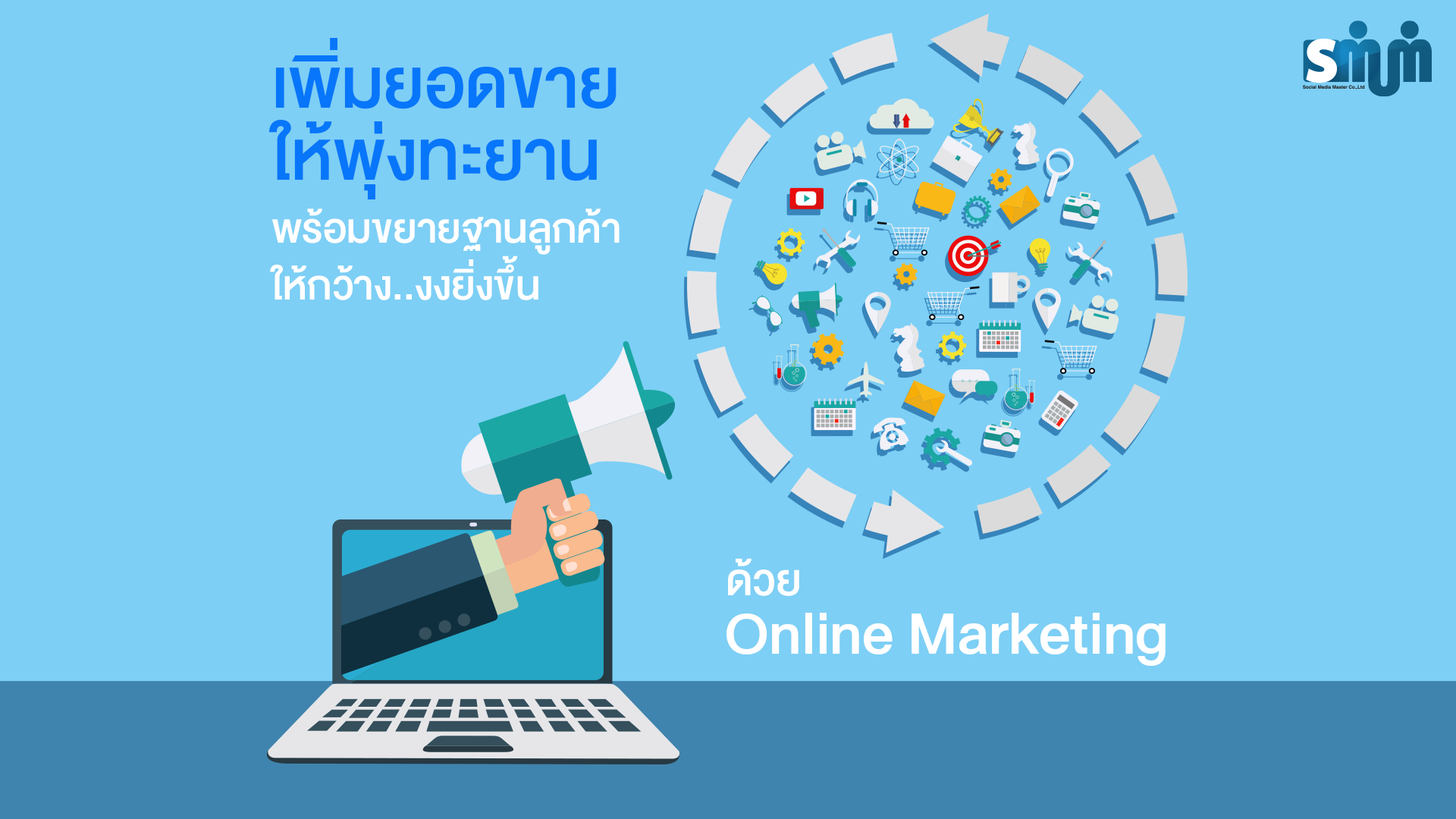
<style>
.page{position:relative;width:1456px;height:819px;background:#7dcff5}
.page>*{position:absolute;margin:0}
.t1{font:57.1px/56.8px "DBHeavent-Med";color:#ffffff}
.t2{font:97.7px/56.8px "DBHeavent-Med";color:#0876fa}
.t3{font:97.7px/71.6px "DBHeavent-Med";color:#0876fa}
.t4{font:57.1px/63.1px "DBHeavent-Med";color:#ffffff}
.t5{font:61.3px "DBHeavent-Med";color:#ffffff}
.t6{font:83.7px "DBHeavent-Med";color:#ffffff}
</style>
<div class="page">
<p class="t1" style="left:269px;top:38px;width:351px;height:262px"><span class="t2">เพิ่มยอดขาย<br></span><span class="t3">ให้พุ่งทะยาน<br></span><span class="t4">พร้อมขยายฐานลูกค้า<br></span>ให้กว้าง..งงยิ่งขึ้น</p>
<p class="t5" style="left:728px;top:558px;width:71px;height:38px">ด้วย</p>
<p class="t6" style="left:726px;top:613px;width:440px;height:53px">Online Marketing</p>
</div>
